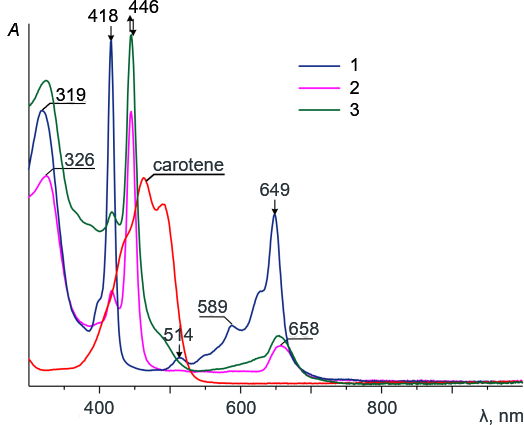
<style>
.page{position:relative;width:524px;height:425px;background:#ffffff}
.page>*{position:absolute;margin:0}
.t1{font:18.3px "ArialMT";color:#000000}
.t2{font:18.3px "Arial-ItalicMT";color:#000000}
.t3{font:18.3px "ArialMT";color:#263238}
</style>
<div class="page">
<p class="t1" style="left:128px;top:0px;width:31px;height:13px">446</p>
<p class="t1" style="left:88px;top:9px;width:30px;height:13px">418</p>
<p class="t2" style="left:7px;top:23px;width:12px;height:13px">A</p>
<p class="t1" style="left:350px;top:58px;width:9px;height:58px">1<br>2<br>3</p>
<p class="t1" style="left:56px;top:88px;width:30px;height:13px">319</p>
<p class="t3" style="left:65px;top:153px;width:29px;height:13px">326</p>
<p class="t3" style="left:153px;top:158px;width:71px;height:13px">carotene</p>
<p class="t3" style="left:260px;top:183px;width:30px;height:13px">649</p>
<p class="t3" style="left:198px;top:300px;width:29px;height:13px">589</p>
<p class="t3" style="left:164px;top:328px;width:29px;height:13px">514</p>
<p class="t3" style="left:289px;top:322px;width:30px;height:13px">658</p>
<p class="t3" style="left:84px;top:401px;width:30px;height:13px">400</p>
<p class="t3" style="left:226px;top:401px;width:30px;height:13px">600</p>
<p class="t3" style="left:367px;top:401px;width:30px;height:13px">800</p>
<p class="t3" style="left:479px;top:409px;width:44px;height:16px">λ, nm</p>
</div>
